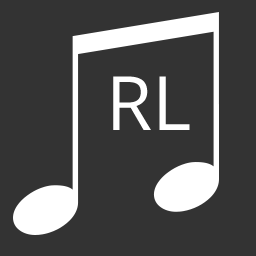
<style>
.page{position:relative;width:256px;height:256px;background:#333333}
.page>*{position:absolute;margin:0}
.t1{font:75px "OpenSans";color:#ffffff}
</style>
<div class="page">
<p class="t1" style="left:113px;top:76px;width:77px;height:54px">RL</p>
</div>
